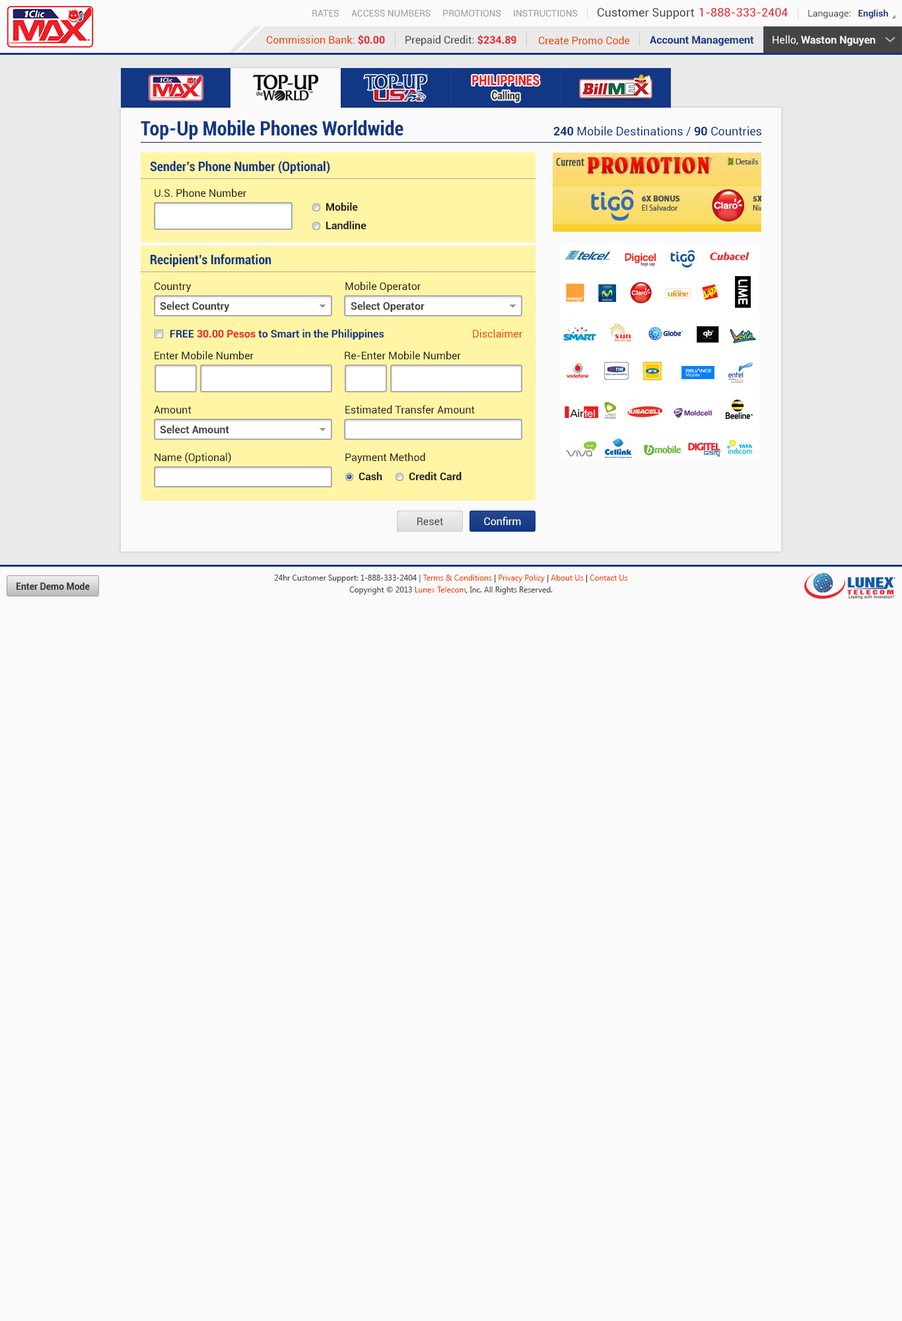
<style>
.page{position:relative;width:902px;height:1321px;background:#fafafa}
.page>*{position:absolute;margin:0}
.t1{font:9.2px "Roboto-Regular";color:#999999}
.t2{font:11.6px "Roboto-Regular";color:#444444}
.t3{font:11.6px "Roboto-Regular";color:#ec2029}
.t4{font:9.2px "Roboto-Regular";color:#444444}
.t5{font:9.2px "Roboto-Bold";color:#123785}
.t6{font:10.6px "Roboto-Regular";color:#ee4400}
.t7{font:10.6px "Roboto-Bold";color:#ec2028}
.t8{font:10.6px "Roboto-Regular";color:#444444}
.t9{font:10.6px "Roboto-Bold";color:#123785}
.t10{font:10.6px "Roboto-Bold";color:#fafafa}
.t11{font:10.6px "Roboto-Regular";color:#fafafa}
.t12{font:14.1px "Roboto-Black";color:#ec2028;scale:0.81 1}
.t13{font:11.3px "Roboto-Black";color:#333333;scale:0.81 1}
.t14{font:19.8px "Roboto-BoldCondensed";color:#123785}
.t15{font:11.9px "Roboto-Regular";color:#123785}
.t16{font:11.9px "Roboto-Bold";color:#123785}
.t17{font:13.2px "Roboto-BoldCondensed";color:#123785}
.t18{font:10.6px "Roboto-Regular";color:#222222}
.t19{font:10.6px "Roboto-Bold";color:#222222}
.t20{font:10.6px "Roboto-Bold";color:#444444}
.t21{font:10.6px "Roboto-Regular";color:#ffffff}
.t22{font:7.9px/11.9px "SegoeUI";color:#444444}
.t23{font:7.9px/11.9px "SegoeUI";color:#ee4400}
.t24{font:7.9px/11.9px "SegoeUI";color:#333333}
.t25{font:9.2px "Roboto-Bold";color:#333333}
</style>
<div class="page">
<p class="t1" style="left:312px;top:10px;width:27px;height:7px">RATES</p>
<p class="t1" style="left:351px;top:10px;width:80px;height:7px">ACCESS NUMBERS</p>
<p class="t1" style="left:443px;top:10px;width:58px;height:7px">PROMOTIONS</p>
<p class="t1" style="left:514px;top:10px;width:64px;height:7px">INSTRUCTIONS</p>
<p class="t2" style="left:598px;top:8px;width:96px;height:11px">Customer Support</p>
<p class="t3" style="left:700px;top:8px;width:88px;height:9px">1-888-333-2404</p>
<p class="t4" style="left:809px;top:9px;width:80px;height:9px">Language:   <span class="t5">English</span></p>
<p class="t6" style="left:267px;top:35px;width:118px;height:10px">Commission Bank: <span class="t7">$0.00</span></p>
<p class="t8" style="left:406px;top:35px;width:111px;height:11px">Prepaid Credit: <span class="t7">$234.89</span></p>
<p class="t6" style="left:539px;top:36px;width:91px;height:9px">Create Promo Code</p>
<p class="t9" style="left:650px;top:36px;width:104px;height:10px">Account Management</p>
<p class="t10" style="left:773px;top:35px;width:103px;height:11px"><span class="t11">Hello, </span>Waston Nguyen</p>
<p class="t12" style="left:472px;top:75px;width:68px;height:11px">PHILIPPINES</p>
<p class="t13" style="left:492px;top:91px;width:28px;height:11px">Calling</p>
<p class="t14" style="left:141px;top:120px;width:263px;height:20px">Top-Up Mobile Phones Worldwide</p>
<p class="t15" style="left:554px;top:126px;width:208px;height:10px"><span class="t16">240</span> Mobile Destinations / <span class="t16">90</span> Countries</p>
<p class="t17" style="left:150px;top:161px;width:180px;height:13px">Sender’s Phone Number (Optional)</p>
<p class="t18" style="left:155px;top:188px;width:91px;height:10px">U.S. Phone Number</p>
<p class="t19" style="left:326px;top:202px;width:32px;height:9px">Mobile</p>
<p class="t19" style="left:326px;top:221px;width:41px;height:9px">Landline</p>
<p class="t17" style="left:151px;top:254px;width:121px;height:13px">Recipient’s Information</p>
<p class="t18" style="left:346px;top:281px;width:75px;height:12px">Mobile Operator</p>
<p class="t18" style="left:155px;top:282px;width:37px;height:11px">Country</p>
<p class="t20" style="left:160px;top:301px;width:70px;height:11px">Select Country</p>
<p class="t20" style="left:351px;top:301px;width:74px;height:11px">Select Operator</p>
<p class="t9" style="left:170px;top:329px;width:215px;height:11px">FREE <span class="t7">30.00 Pesos</span> to Smart in the Philippines</p>
<p class="t6" style="left:473px;top:329px;width:50px;height:9px">Disclaimer</p>
<p class="t18" style="left:155px;top:351px;width:99px;height:9px">Enter Mobile Number</p>
<p class="t18" style="left:345px;top:351px;width:116px;height:9px">Re-Enter Mobile Number</p>
<p class="t18" style="left:154px;top:406px;width:38px;height:8px">Amount</p>
<p class="t18" style="left:346px;top:405px;width:129px;height:9px">Estimated Transfer Amount</p>
<p class="t20" style="left:160px;top:425px;width:69px;height:9px">Select Amount</p>
<p class="t18" style="left:155px;top:452px;width:76px;height:12px">Name (Optional)</p>
<p class="t18" style="left:346px;top:453px;width:79px;height:11px">Payment Method</p>
<p class="t19" style="left:359px;top:472px;width:24px;height:9px">Cash</p>
<p class="t19" style="left:409px;top:472px;width:53px;height:9px">Credit Card</p>
<p class="t8" style="left:418px;top:517px;width:25px;height:8px">Reset</p>
<p class="t21" style="left:484px;top:517px;width:37px;height:8px">Confirm</p>
<p class="t22" style="left:274px;top:575px;width:354px;height:20px;text-align:center">24hr Customer Support: 1-888-333-2404 | <span class="t23">Terms &amp; Conditions</span><span class="t24"> | </span><span class="t23">Privacy Policy</span><span class="t24"> | </span><span class="t23">About Us</span><span class="t24"> | </span><span class="t23">Contact Us<br></span>Copyright © 2013 <span class="t23">Lunex Telecom</span><span class="t24">,</span> Inc. All Rights Reserved.</p>
<p class="t25" style="left:17px;top:583px;width:73px;height:7px">Enter Demo Mode</p>
</div>
